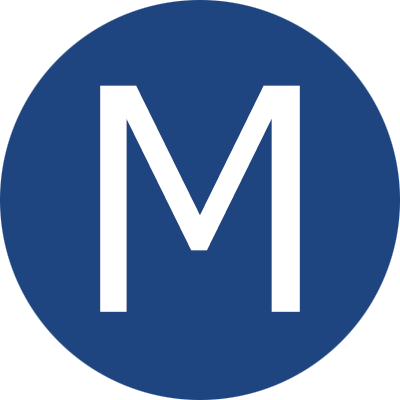
<style>
.page{position:relative;width:400px;height:400px;background:#1e4580}
.page>*{position:absolute;margin:0}
.t1{font:306.7px "Meiryo";color:#ffffff}
</style>
<div class="page">
<p class="t1" style="left:100px;top:85px;width:200px;height:227px">M</p>
</div>
